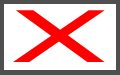
<style>
.page{position:relative;width:120px;height:75px;background:#ffffff}
.page>*{position:absolute;margin:0}
.t1{font:68px "Thonburi";color:#ff0000;scale:2.3 1}
</style>
<div class="page">
<p class="t1" style="left:13px;top:10px;width:92px;height:52px">X</p>
</div>
